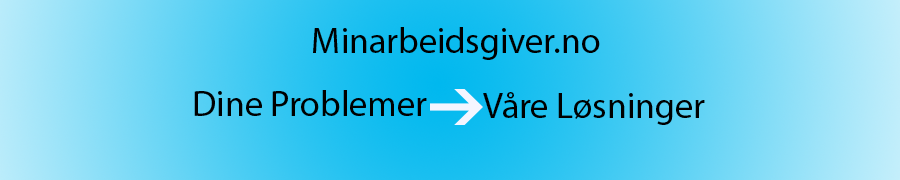
<style>
.page{position:relative;width:900px;height:180px}
.page>*{position:absolute;margin:0}
.t1{font:36px "MyriadHebrew-Regular";color:#000000}
</style>
<div class="page">
<p class="t1" style="left:313px;top:27px;width:287px;height:33px">Minarbeidsgiver.no</p>
<p class="t1" style="left:194px;top:90px;width:233px;height:26px">Dine Problemer</p>
<p class="t1" style="left:483px;top:92px;width:222px;height:33px">Våre Løsninger</p>
</div>
